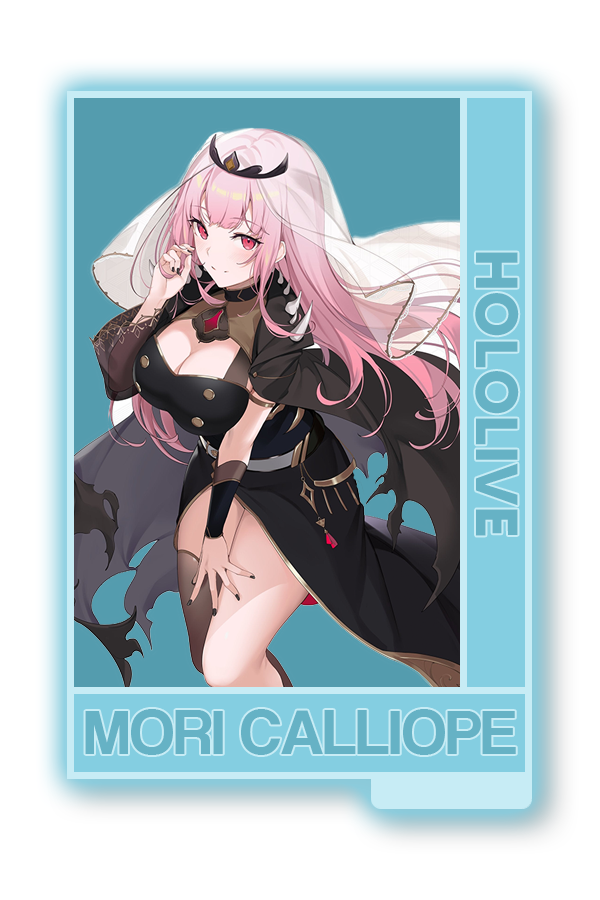
<style>
.page{position:relative;width:600px;height:900px;background:#ffffff}
.page>*{position:absolute;margin:0}
.t1{font:59.2px "MADETOMMY-Bold";color:#66b2c5}
.t2{font:65.9px "CoolveticaRg-Regular";color:#66b2c5}
</style>
<div class="page">
<p class="t1" style="left:475px;top:252px;width:44px;height:284px;rotate:90deg">HOLOLIVE</p>
<p class="t2" style="left:85px;top:709px;width:431px;height:46px">MORI CALLIOPE</p>
</div>
